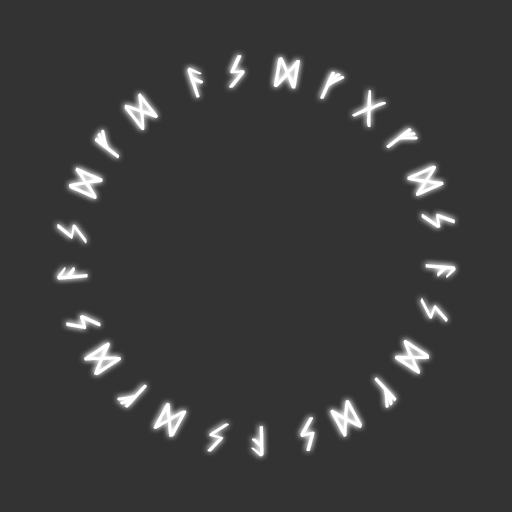
<style>
.page{position:relative;width:512px;height:512px;background:#333333}
.page>*{position:absolute;margin:0}
.t1{font:42.5px "Rune";letter-spacing:0.18em;color:#ffffff;font-weight:bold;scale:1.18 1}
</style>
<div class="page">
<p class="t1" style="left:57px;top:55px;width:399px;height:402px">asdfgfdsasdfdsasdfdsasdfdsasdfdsa</p>
</div>
